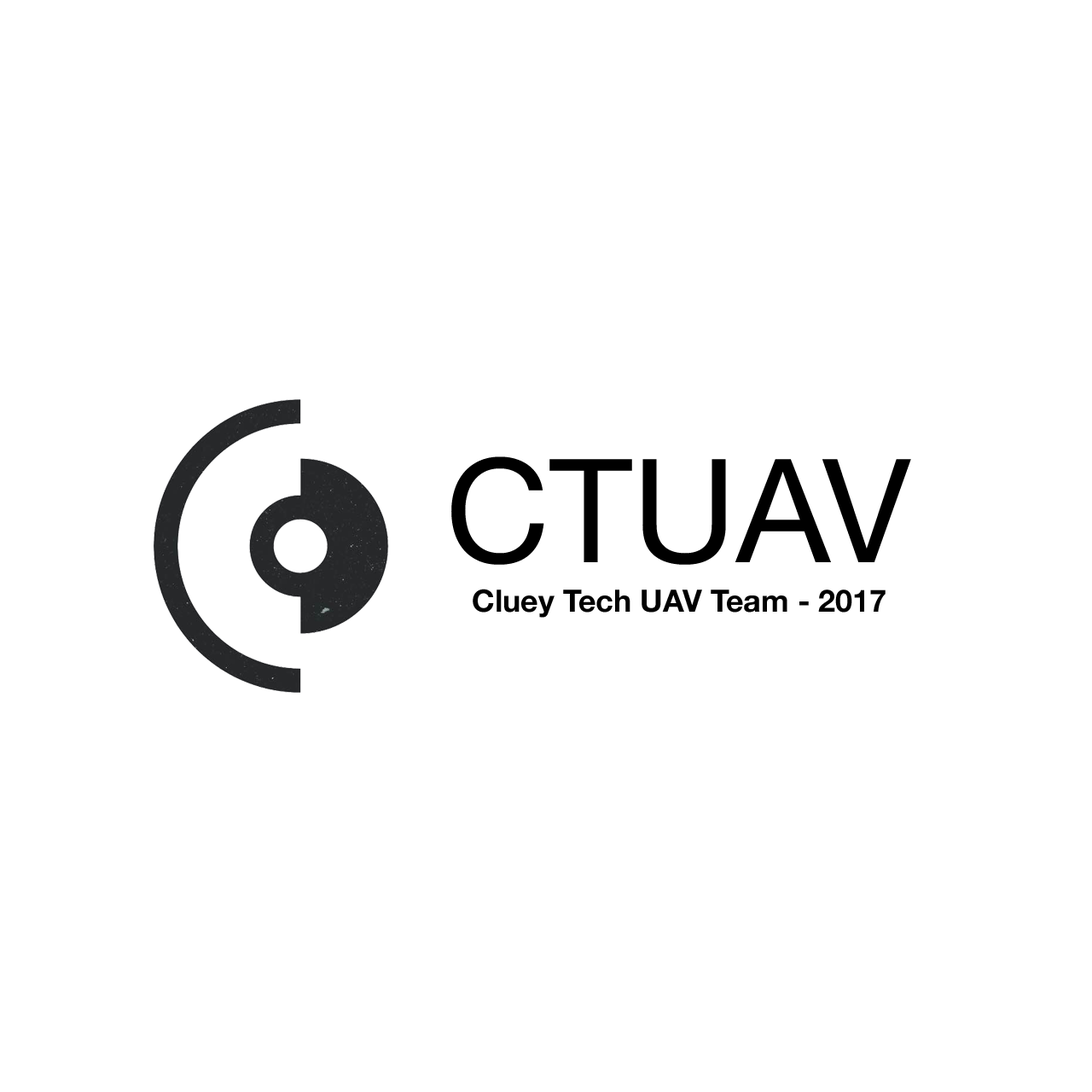
<style>
.page{position:relative;width:1092px;height:1092px;background:#ffffff}
.page>*{position:absolute;margin:0}
.t1{font:144.2px "HelveticaNeue";color:#000000}
.t2{font:30.7px "HelveticaNeue-Bold";color:#000000}
</style>
<div class="page">
<p class="t1" style="left:451px;top:456px;width:460px;height:109px">CTUAV</p>
<p class="t2" style="left:473px;top:589px;width:413px;height:29px">Cluey Tech UAV Team - 2017</p>
</div>
